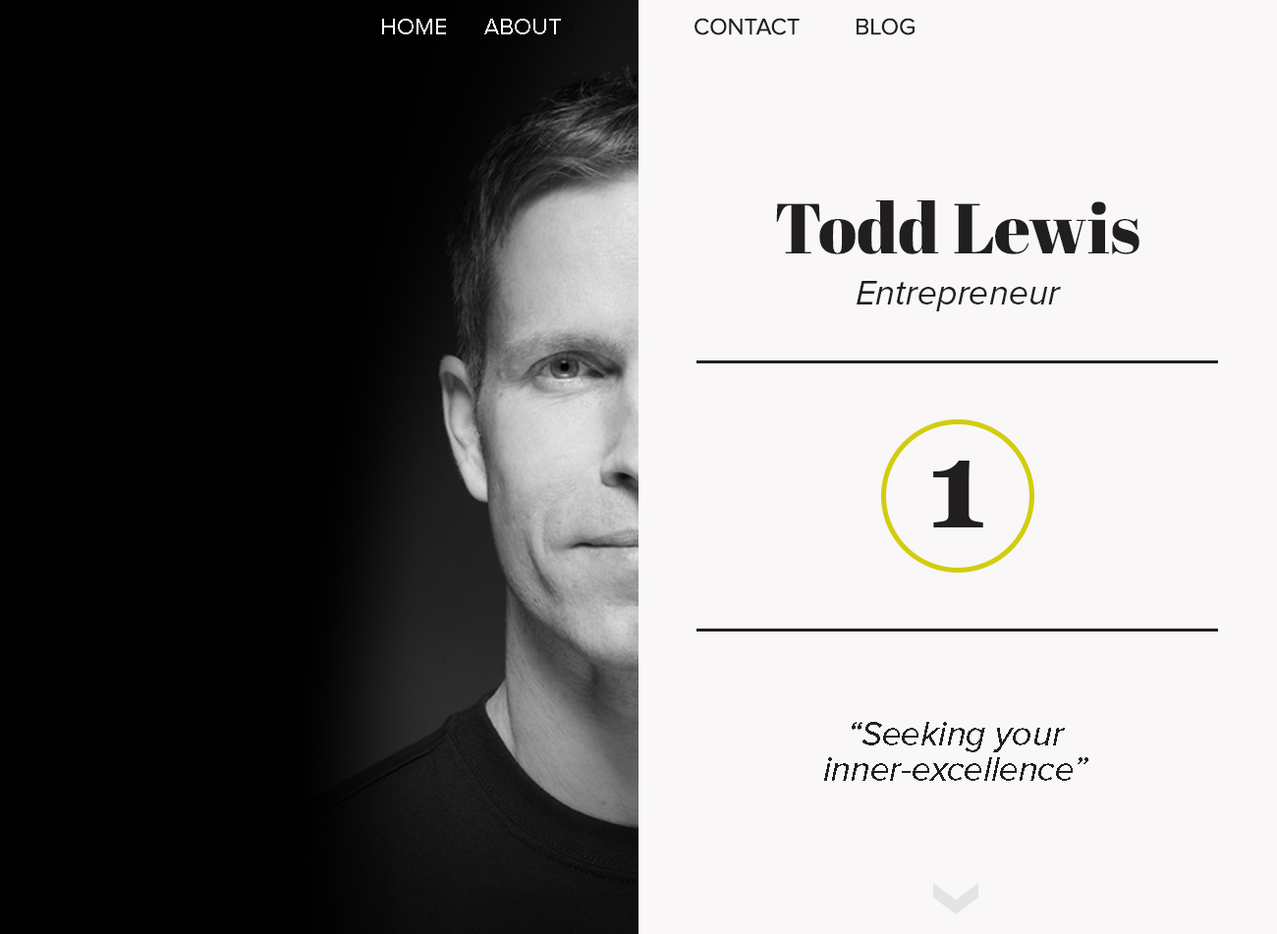
<style>
.page{position:relative;width:1277px;height:934px;background:#f9f7f7}
.page>*{position:absolute;margin:0}
.t1{font:23.6px "ProximaNova-Regular";color:#211e1e}
.t2{font:23.6px "ProximaNova-Regular";color:#fefbfb}
.t3{font:70.7px "AbrilFatface-Regular";color:#211e1e}
.t4{font:35.4px "ProximaNova-RegularIt";color:#211e1e}
</style>
<div class="page">
<p class="t1" style="left:694px;top:18px;width:220px;height:17px">CONTACT         BLOG</p>
<p class="t2" style="left:382px;top:19px;width:179px;height:15px">HOME      ABOUT</p>
<p class="t3" style="left:776px;top:200px;width:363px;height:54px">Todd Lewis</p>
<p class="t4" style="left:856px;top:281px;width:205px;height:30px">Entrepreneur</p>
<p class="t4" style="left:824px;top:722px;width:264px;height:59px">“Seeking your inner-excellence”</p>
</div>
